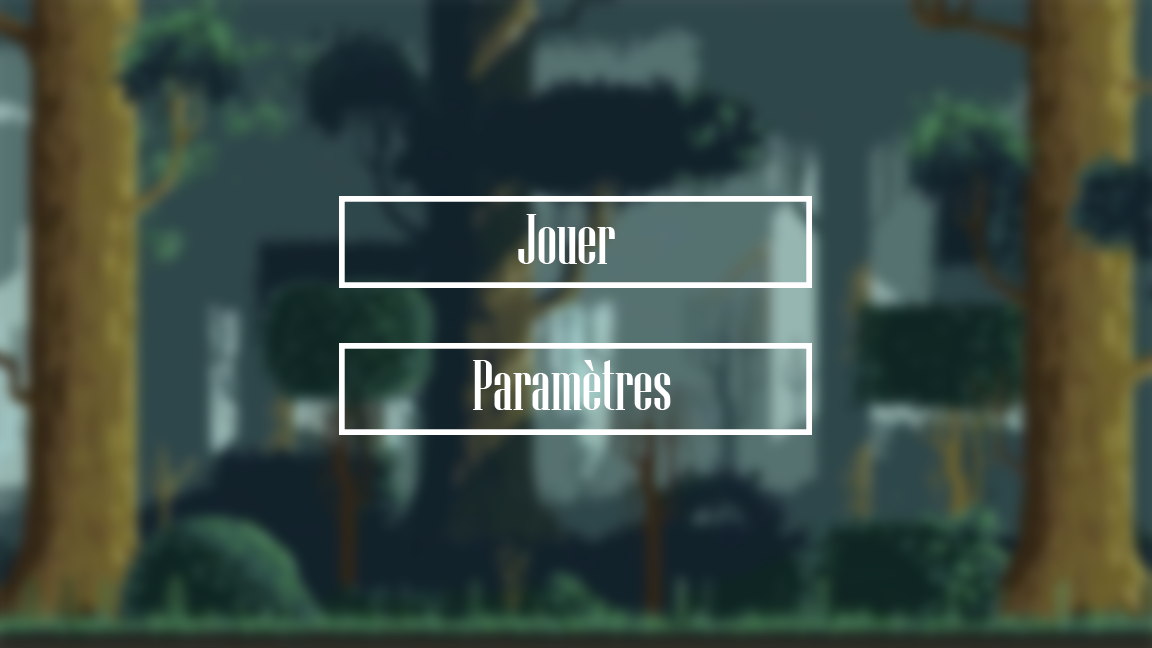
<style>
.page{position:relative;width:1152px;height:648px}
.page>*{position:absolute;margin:0}
.t1{font:72px "NiagaraSolid-Reg";color:#ffffff}
</style>
<div class="page">
<p class="t1" style="left:518px;top:214px;width:97px;height:50px">Jouer</p>
<p class="t1" style="left:473px;top:360px;width:198px;height:50px">Paramètres</p>
</div>
